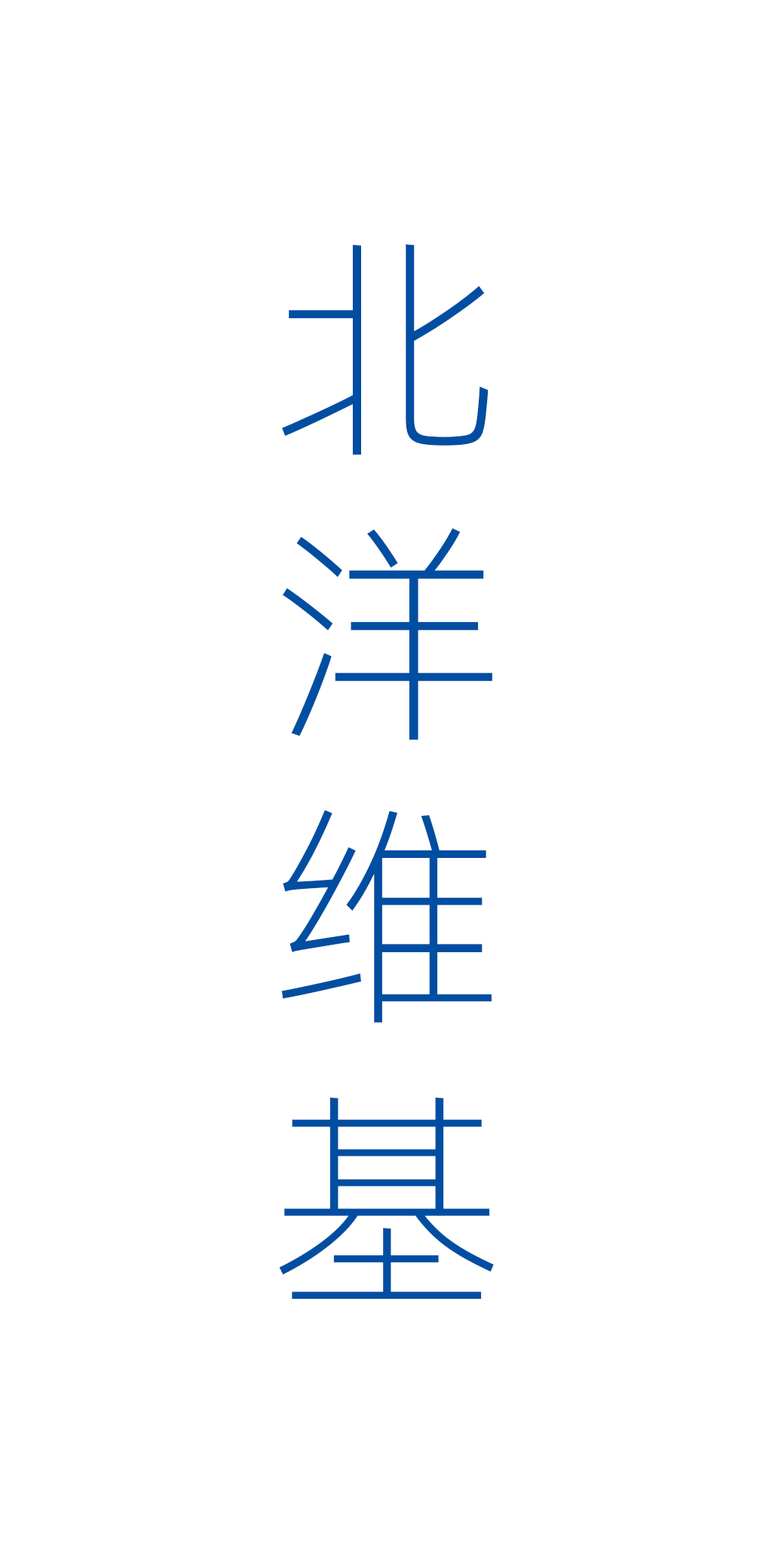
<style>
.page{position:relative;width:772px;height:1544px;background:#ffffff}
.page>*{position:absolute;margin:0}
.t1{font:236.5px "Alibaba-PuHuiTi-L";color:#004ea2}
</style>
<div class="page">
<p class="t1" style="left:279px;top:244px;width:215px;height:1055px">北<br>洋<br>维<br>基</p>
</div>
